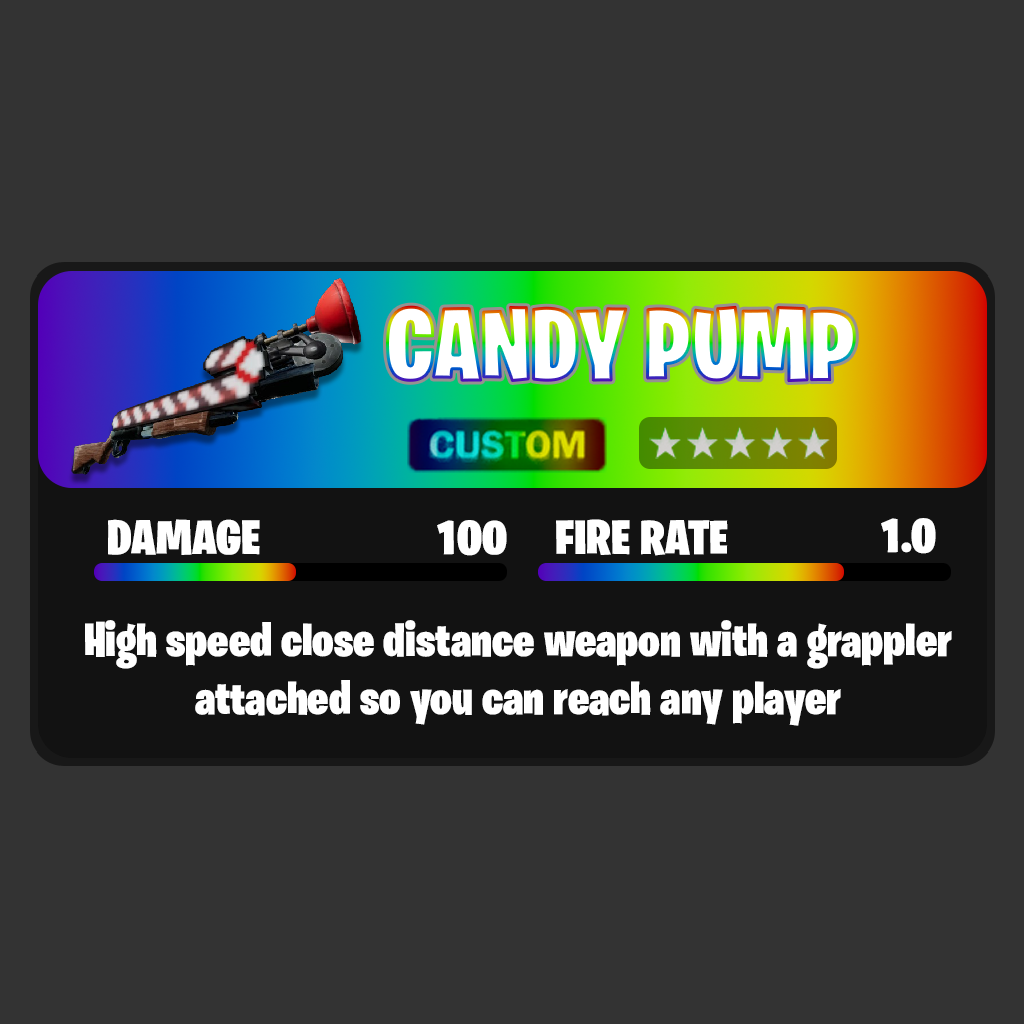
<style>
.page{position:relative;width:1024px;height:1024px;background:#333333}
.page>*{position:absolute;margin:0}
.t1{font:100.8px "BurbankBigCondensed-Black";color:#ffffff}
.t2{font:48.4px "BurbankBigCondensed-Black";color:#ffffff;scale:1.1 1}
.t3{font:48.3px "BurbankBigCondensed-Black";color:#ffffff;scale:1.1 1}
.t4{font:48px "BurbankBigCondensed-Black";color:#ffffff}
</style>
<div class="page">
<p class="t1" style="left:387px;top:306px;width:468px;height:76px">CANDY PUMP</p>
<p class="t2" style="left:108px;top:519px;width:152px;height:36px">DAMAGE</p>
<p class="t2" style="left:437px;top:520px;width:70px;height:36px">100</p>
<p class="t3" style="left:556px;top:519px;width:172px;height:37px">FIRE RATE</p>
<p class="t3" style="left:881px;top:518px;width:55px;height:36px">1.0</p>
<p class="t4" style="left:85px;top:620px;width:867px;height:106px;text-align:center">High speed close distance weapon with a grappler attached so you can reach any player</p>
</div>
